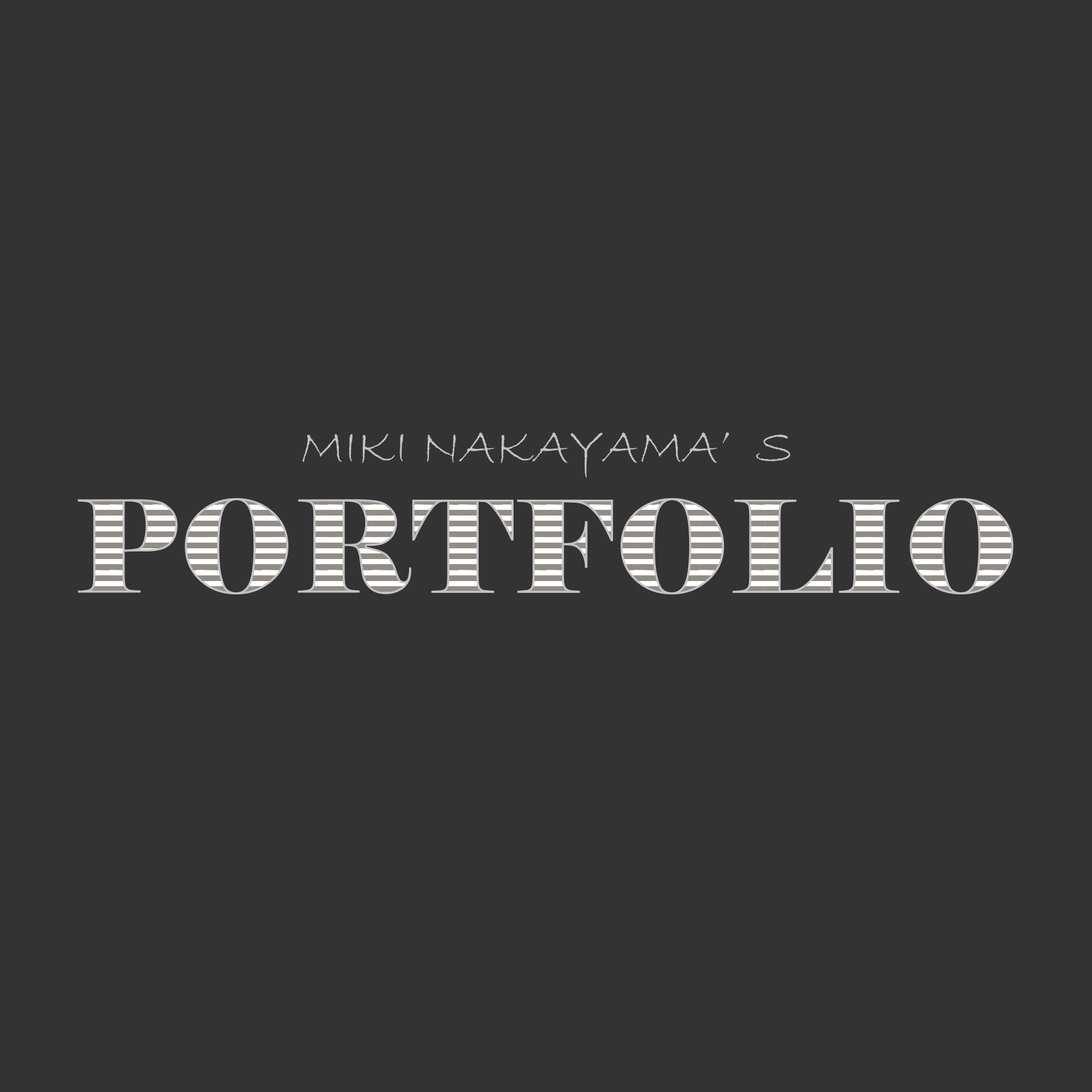
<style>
.page{position:relative;width:1092px;height:1092px;background:#333333}
.page>*{position:absolute;margin:0}
.t1{font:51.2px "BradleyHandITC";color:#c3c3c3}
.t2{font:128px "Elephant-Regular"}
</style>
<div class="page">
<p class="t1" style="left:303px;top:432px;width:487px;height:46px">MIKI NAKAYAMA’S</p>
<p class="t2" style="left:78px;top:498px;width:936px;height:96px">PORTFOLIO</p>
</div>
